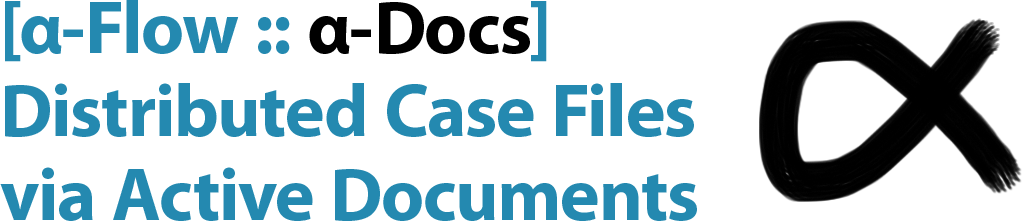
<style>
.page{position:relative;width:1022px;height:221px;background:#ffffff}
.page>*{position:absolute;margin:0}
.t1{font:75px/83.3px "MyriadPro-Bold";color:#2489b0}
.t2{font:75px/83.3px "MyriadPro-Bold";color:#000000}
</style>
<div class="page">
<p class="t1" style="left:0px;top:0px;width:697px;height:221px">[α-Flow :: <span class="t2">α-Docs</span>]<br>Distributed Case Files<br>via Active Documents</p>
</div>
